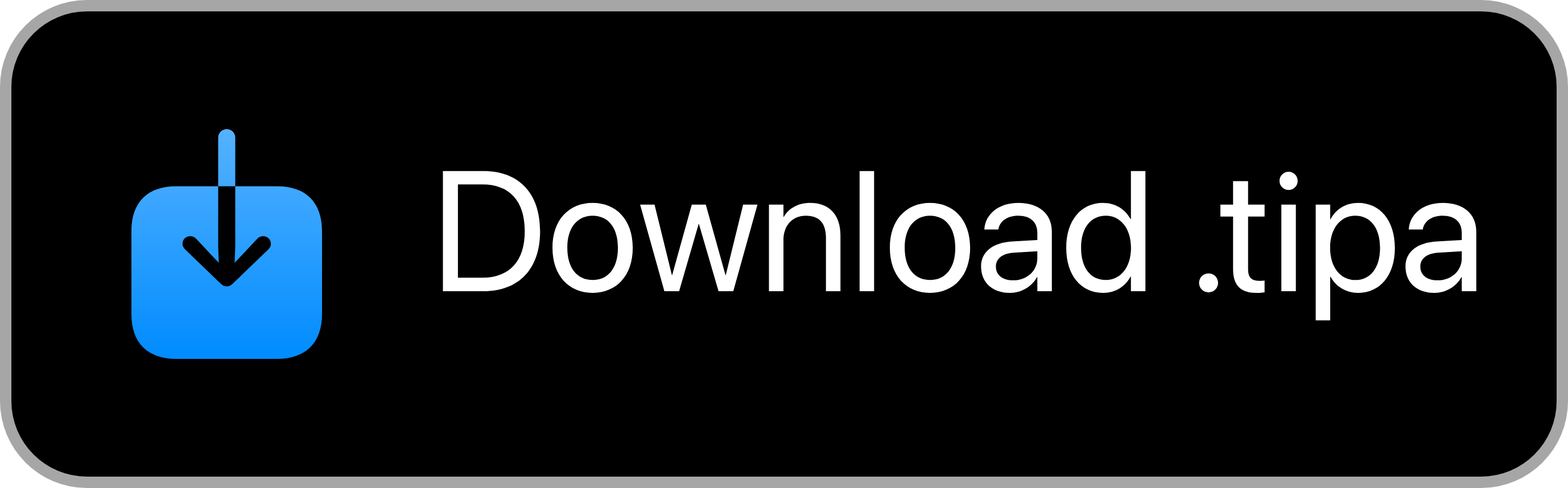
<style>
.page{position:relative;width:1568px;height:488px;background:#000000}
.page>*{position:absolute;margin:0}
.t1{font:170.7px "SFProDisplay-Regular";color:#ffffff}
</style>
<div class="page">
<p class="t1" style="left:443px;top:171px;width:1033px;height:150px">Download .tipa</p>
</div>
